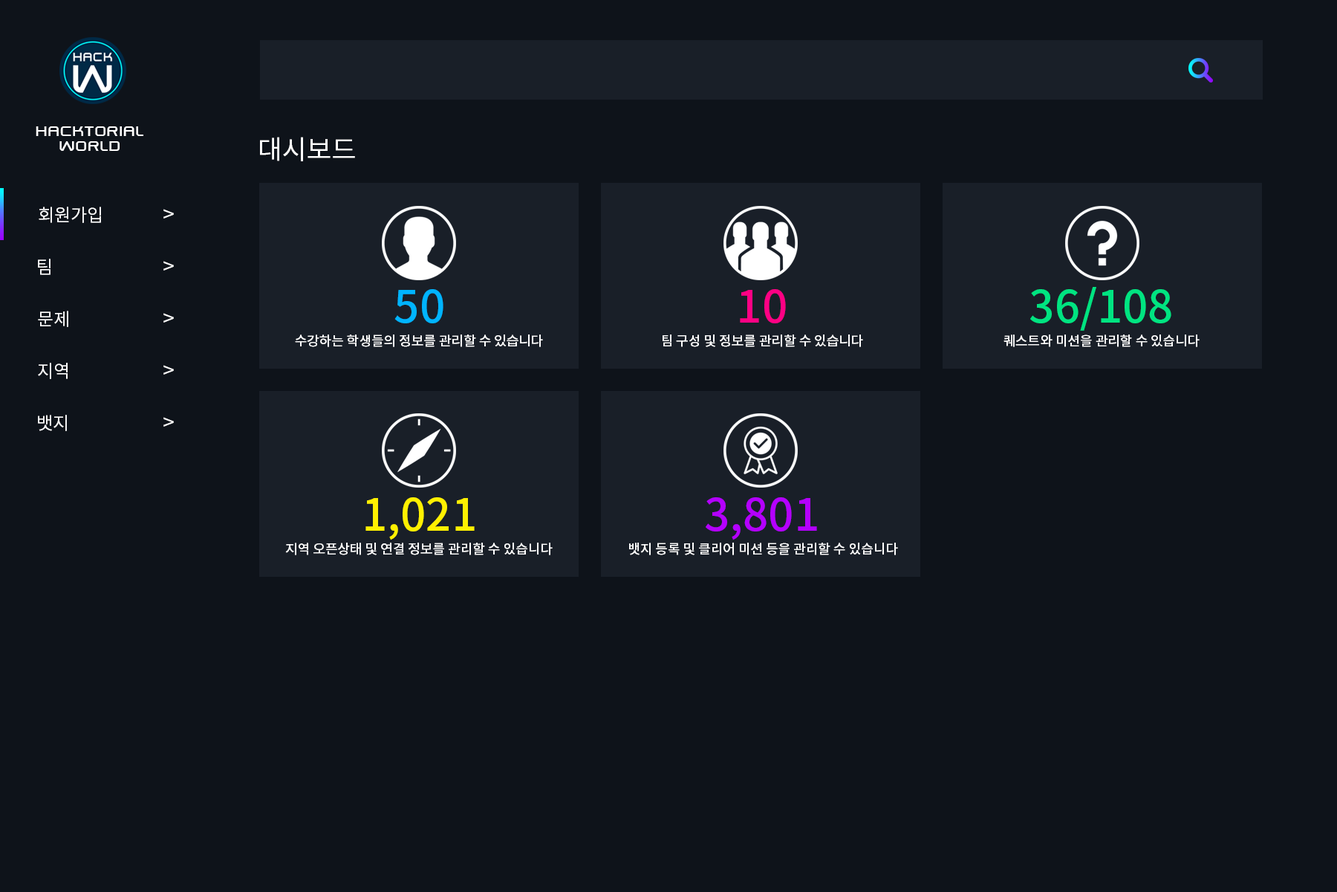
<style>
.page{position:relative;width:1337px;height:892px;background:#0e131a}
.page>*{position:absolute;margin:0}
.t1{font:17.8px/14.9px "SwiszRegular";color:#ffffff}
.t2{font:26.7px "NotoSansCJKkr-Regular";color:#ffffff}
.t3{font:17.8px "NotoSansCJKkr-Regular";color:#ffffff}
.t4{font:20.8px "NotoSansCJKkr-Regular";color:#ffffff}
.t5{font:44.6px "NotoSansCJKkr-Medium";color:#00b4ff}
.t6{font:44.6px "NotoSansCJKkr-Medium";color:#ff0084}
.t7{font:44.6px "NotoSansCJKkr-Medium";color:#00e481}
.t8{font:13.4px "NotoSansCJKkr-Medium";color:#ffffff}
.t9{font:44.6px "NotoSansCJKkr-Medium";color:#fff000}
.t10{font:44.6px "NotoSansCJKkr-Medium";color:#b400ff}
</style>
<div class="page">
<p class="t1" style="left:36px;top:126px;width:107px;height:25px;text-align:center">hacktorial<br>world</p>
<p class="t2" style="left:260px;top:137px;width:95px;height:24px">대시보드</p>
<p class="t3" style="left:39px;top:207px;width:62px;height:16px">회원가입</p>
<p class="t4" style="left:163px;top:209px;width:11px;height:9px">&gt;</p>
<p class="t3" style="left:38px;top:259px;width:13px;height:16px">팀</p>
<p class="t4" style="left:163px;top:261px;width:11px;height:9px">&gt;</p>
<p class="t5" style="left:395px;top:289px;width:49px;height:34px">50</p>
<p class="t6" style="left:740px;top:289px;width:46px;height:34px">10</p>
<p class="t7" style="left:1031px;top:287px;width:141px;height:44px">36/108</p>
<p class="t3" style="left:38px;top:311px;width:30px;height:16px">문제</p>
<p class="t4" style="left:163px;top:313px;width:11px;height:9px">&gt;</p>
<p class="t8" style="left:295px;top:334px;width:248px;height:13px">수강하는 학생들의 정보를 관리할 수 있습니다</p>
<p class="t8" style="left:663px;top:334px;width:200px;height:13px">팀 구성 및 정보를 관리할 수 있습니다</p>
<p class="t8" style="left:1004px;top:334px;width:196px;height:13px">퀘스트와 미션을 관리할 수 있습니다</p>
<p class="t3" style="left:38px;top:363px;width:30px;height:16px">지역</p>
<p class="t4" style="left:163px;top:365px;width:11px;height:9px">&gt;</p>
<p class="t3" style="left:38px;top:415px;width:29px;height:16px">뱃지</p>
<p class="t4" style="left:163px;top:417px;width:11px;height:9px">&gt;</p>
<p class="t9" style="left:366px;top:497px;width:109px;height:42px">1,021</p>
<p class="t10" style="left:706px;top:497px;width:111px;height:42px">3,801</p>
<p class="t8" style="left:285px;top:542px;width:268px;height:13px">지역 오픈상태 및 연결 정보를 관리할 수 있습니다</p>
<p class="t8" style="left:629px;top:542px;width:269px;height:13px">뱃지 등록 및 클리어 미션 등을 관리할 수 있습니다</p>
</div>
